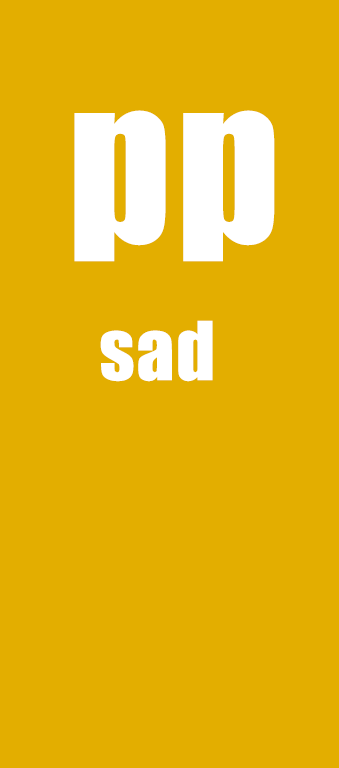
<style>
.page{position:relative;width:339px;height:768px;background:#e3ae00}
.page>*{position:absolute;margin:0}
.t1{font:200px "Impact";letter-spacing:0.025em;color:#ffffff}
.t2{font:75px "Impact";letter-spacing:0.025em;color:#ffffff}
</style>
<div class="page">
<p class="t1" style="left:74px;top:110px;width:201px;height:152px">pp</p>
<p class="t2" style="left:100px;top:320px;width:113px;height:62px">sad</p>
</div>
